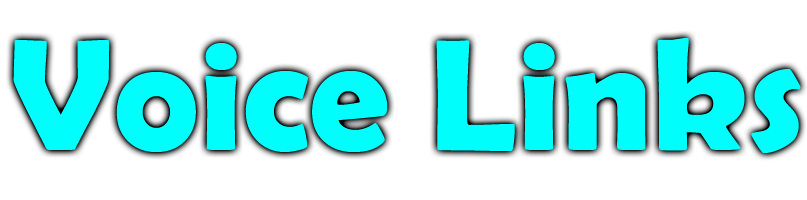
<style>
.page{position:relative;width:807px;height:200px;background:#ffffff}
.page>*{position:absolute;margin:0}
.t1{font:160px "BerlinSansFBDemi-Bold";color:#00fffc}
</style>
<div class="page">
<p class="t1" style="left:13px;top:38px;width:788px;height:115px">Voice Links</p>
</div>
